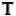
<style>
.page{position:relative;width:16px;height:16px;background:#ffffff}
.page>*{position:absolute;margin:0}
.t1{font:20px "Algerian";color:#000000}
</style>
<div class="page">
<p class="t1" style="left:1px;top:2px;width:13px;height:13px">T</p>
</div>
